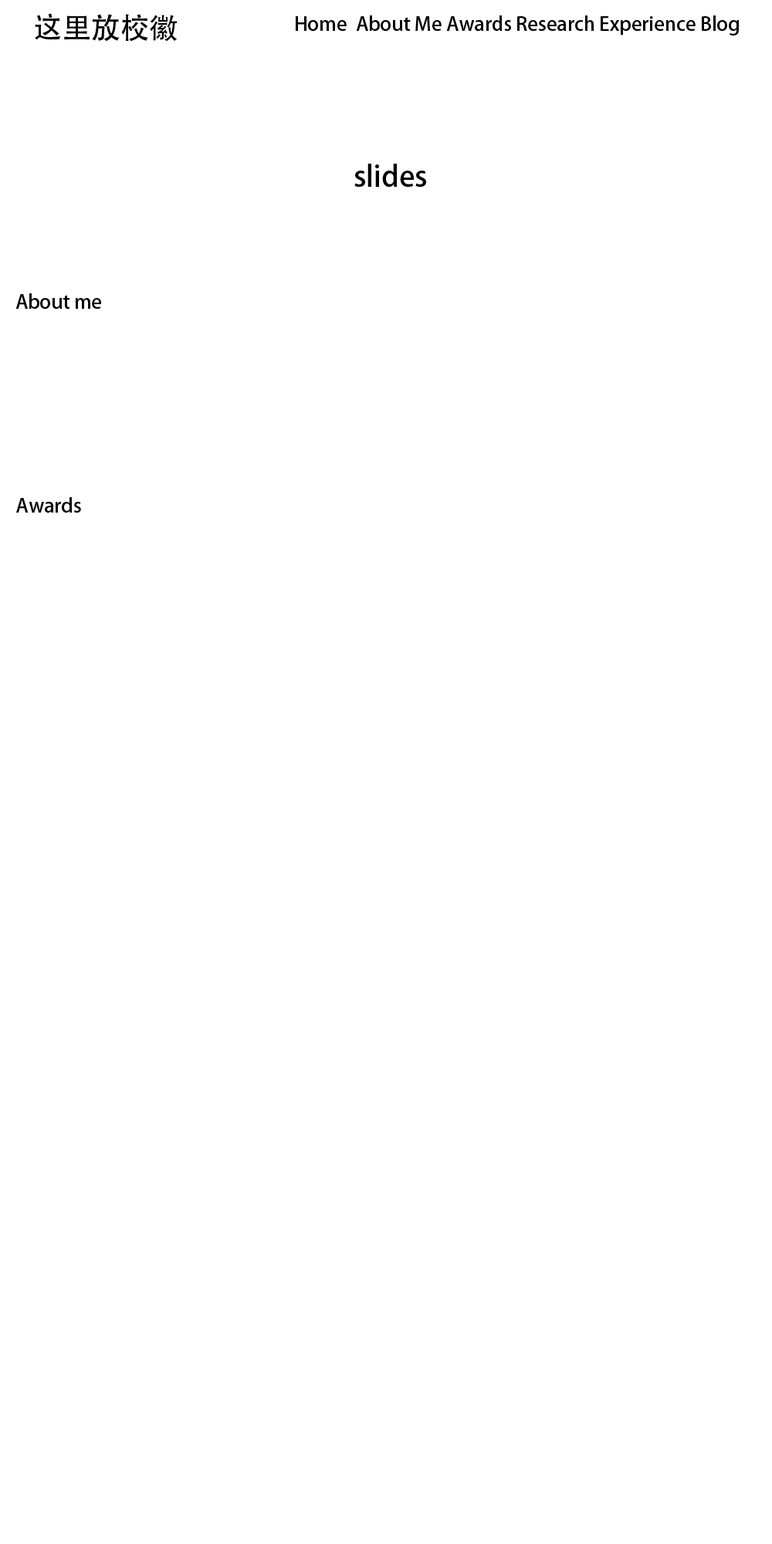
<style>
.page{position:relative;width:772px;height:1544px;background:#ffffff}
.page>*{position:absolute;margin:0}
.t1{font:29px "AdobeHeitiStd-Regular";color:#000000}
.t2{font:19.3px "AdobeHeitiStd-Regular";color:#000000}
</style>
<div class="page">
<p class="t1" style="left:35px;top:13px;width:143px;height:29px">这里放校徽</p>
<p class="t2" style="left:296px;top:15px;width:443px;height:21px">Home  About Me Awards Research Experience Blog</p>
<p class="t1" style="left:354px;top:164px;width:72px;height:23px">slides</p>
<p class="t2" style="left:15px;top:293px;width:86px;height:16px">About me</p>
<p class="t2" style="left:16px;top:497px;width:65px;height:16px">Awards</p>
</div>
